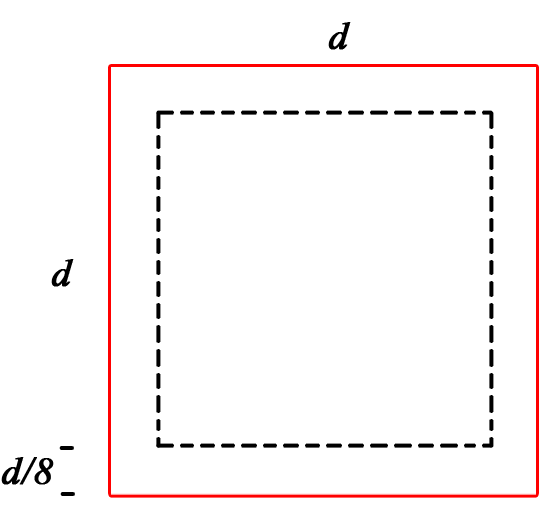
<style>
.page{position:relative;width:556px;height:515px;background:#ffffff}
.page>*{position:absolute;margin:0}
.t1{font:48px "Vijaya";color:#000000;font-weight:bold}
</style>
<div class="page">
<p class="t1" style="left:328px;top:22px;width:23px;height:28px">d</p>
<p class="t1" style="left:51px;top:259px;width:23px;height:28px">d</p>
<p class="t1" style="left:1px;top:457px;width:53px;height:28px">d/8</p>
</div>
